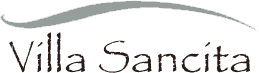
<style>
.page{position:relative;width:259px;height:73px;background:#ffffff}
.page>*{position:absolute;margin:0}
.t1{font:48px "Papyrus-Regular";color:#271c16}
.t2{font:33.1px "Papyrus-Regular";color:#271c16}
</style>
<div class="page">
<p class="t1" style="left:9px;top:32px;width:241px;height:41px"><span class="t2">V</span>illa <span class="t2">S</span>ancita</p>
</div>
